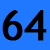
<style>
.page{position:relative;width:50px;height:50px;background:#1f78fd}
.page>*{position:absolute;margin:0}
.t1{font:41.7px "TrebuchetMS";color:#000000;font-weight:bold}
</style>
<div class="page">
<p class="t1" style="left:2px;top:10px;width:45px;height:31px">64</p>
</div>
